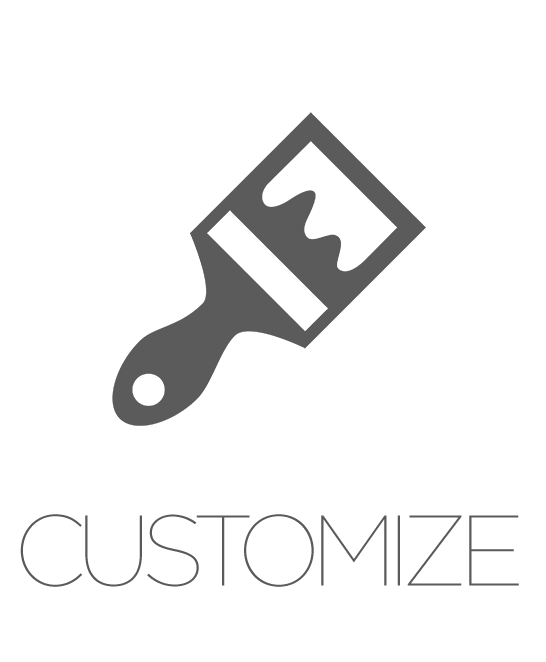
<style>
.page{position:relative;width:546px;height:662px;background:#ffffff}
.page>*{position:absolute;margin:0}
.t1{font:100px "Gotham-Thin";letter-spacing:-0.1em;color:#5a5a5a}
</style>
<div class="page">
<p class="t1" style="left:20px;top:514px;width:499px;height:73px">CUSTOMIZE</p>
</div>
